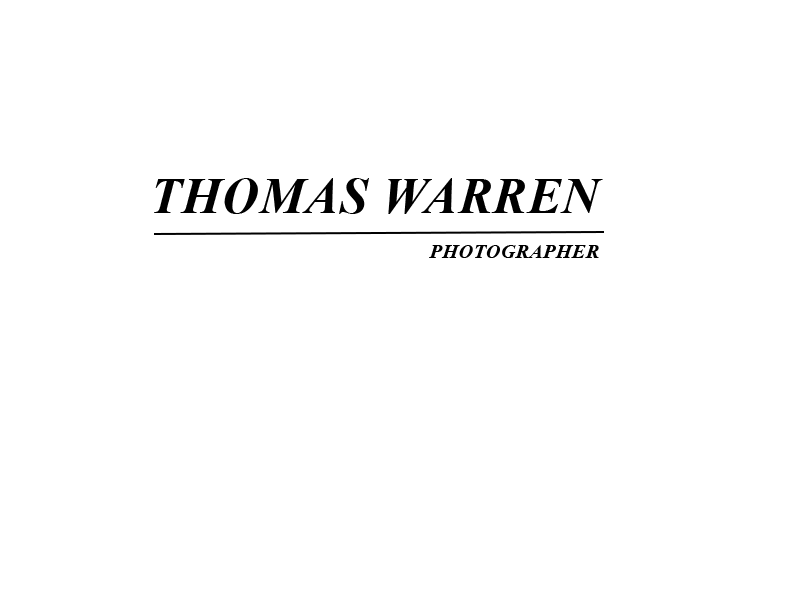
<style>
.page{position:relative;width:800px;height:600px;background:#ffffff}
.page>*{position:absolute;margin:0}
.t1{font:50px "TimesNewRomanPS-BoldItalicMT";letter-spacing:0.025em;color:#000000;text-transform:uppercase}
.t2{font:20px "TimesNewRomanPS-BoldItalicMT";letter-spacing:0.025em;color:#000000;text-transform:uppercase}
</style>
<div class="page">
<p class="t1" style="left:154px;top:178px;width:449px;height:36px">THOMAS WARREN</p>
<p class="t2" style="left:429px;top:245px;width:170px;height:13px">photographer</p>
</div>
